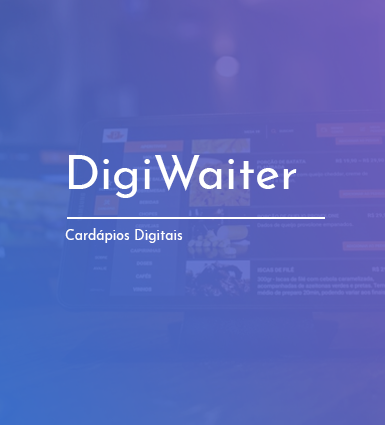
<style>
.page{position:relative;width:385px;height:425px}
.page>*{position:absolute;margin:0}
.t1{font:48px "JosefinSans-Regular";color:#ffffff}
.t2{font:14px "JosefinSans-Regular";color:#ffffff}
</style>
<div class="page">
<p class="t1" style="left:69px;top:155px;width:228px;height:43px">DigiWaiter</p>
<p class="t2" style="left:65px;top:228px;width:118px;height:15px">Cardápios Digitais</p>
</div>
